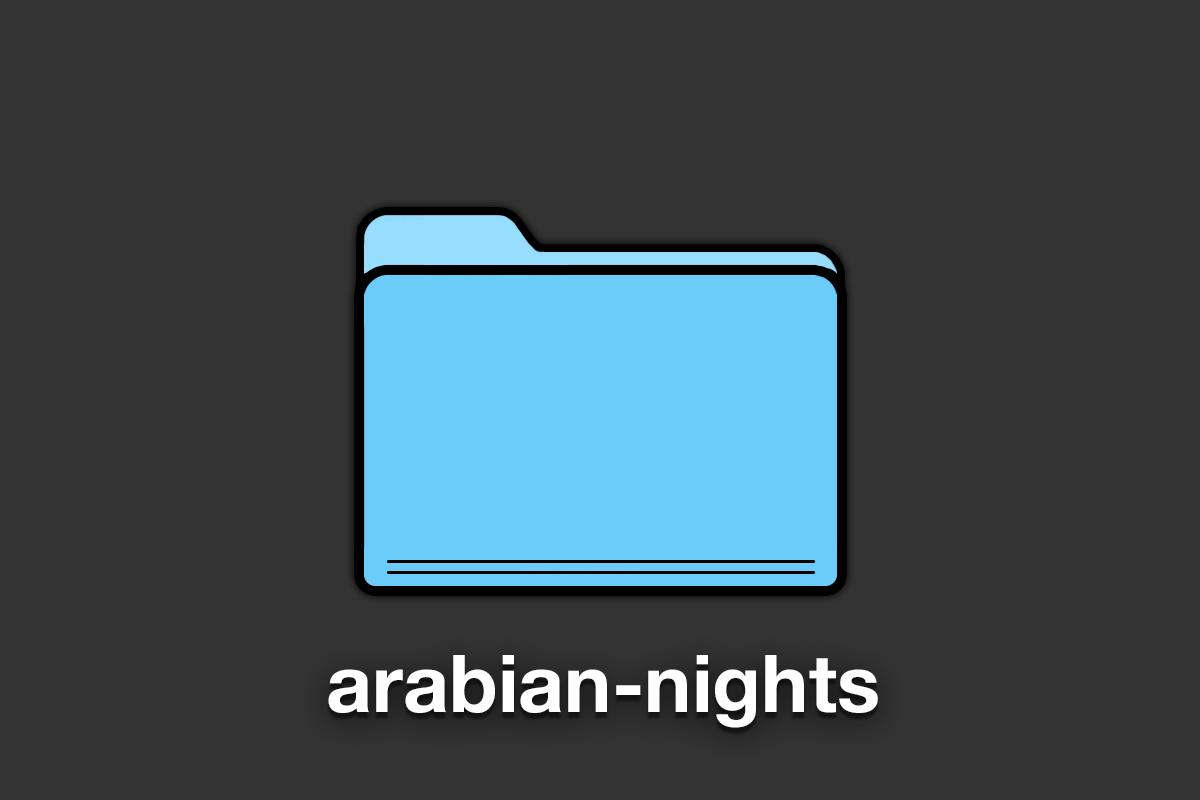
<style>
.page{position:relative;width:1200px;height:800px;background:#333333}
.page>*{position:absolute;margin:0}
.t1{font:80px "HelveticaNeue-Bold";color:#ffffff}
</style>
<div class="page">
<p class="t1" style="left:328px;top:655px;width:550px;height:73px">arabian-nights</p>
</div>
